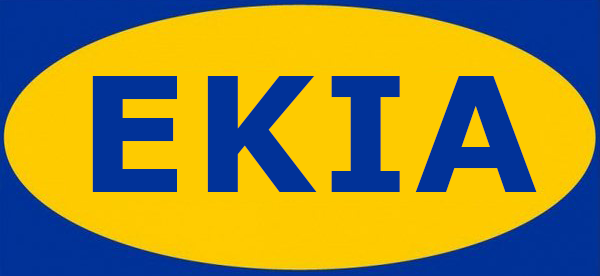
<style>
.page{position:relative;width:600px;height:276px;background:#fecb00}
.page>*{position:absolute;margin:0}
.t1{font:160px "Verdana-Bold";color:#013298}
</style>
<div class="page">
<p class="t1" style="left:92px;top:76px;width:445px;height:116px">E  K  I  A</p>
</div>
